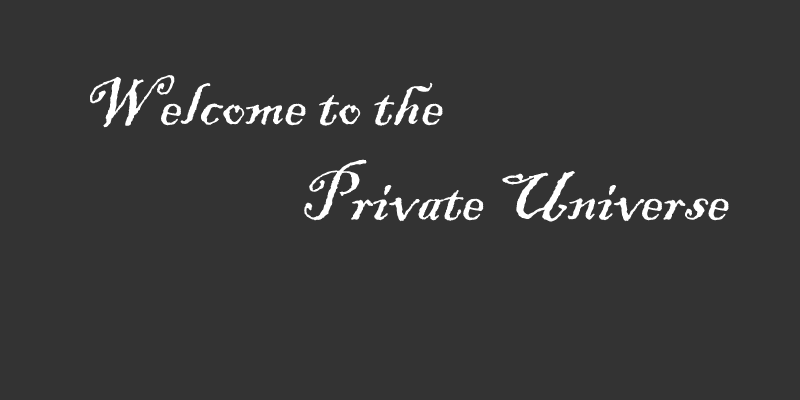
<style>
.page{position:relative;width:800px;height:400px;background:#333333}
.page>*{position:absolute;margin:0}
.t1{font:72px "BlackadderITC-Regular";color:#ffffff}
</style>
<div class="page">
<p class="t1" style="left:90px;top:75px;width:353px;height:53px">Welcome to the</p>
<p class="t1" style="left:304px;top:159px;width:425px;height:63px">Private Universe</p>
</div>
